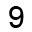
<style>
.page{position:relative;width:32px;height:32px;background:#ffffff}
.page>*{position:absolute;margin:0}
.t1{font:30px "ArialMT";color:#000000}
</style>
<div class="page">
<p class="t1" style="left:9px;top:6px;width:15px;height:22px">9</p>
</div>
